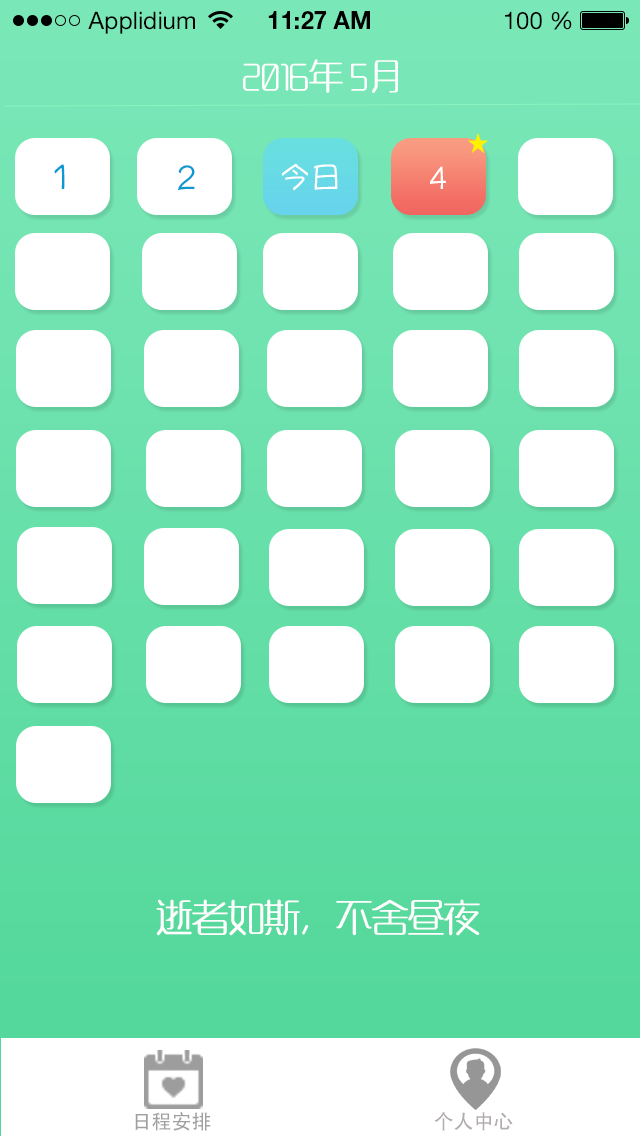
<style>
.page{position:relative;width:640px;height:1136px;background:#ffffff}
.page>*{position:absolute;margin:0}
.t1{font:24px "HelveticaNeueLTStd-Roman";color:#000000}
.t2{font:24px "HelveticaNeueLTStd-Bd";color:#000000}
.t3{font:34px "MFYaYuan_Noncommercial-Regular";color:#ffffff}
.t4{font:34px "YuppySC-Regular";color:#0c98d3}
.t5{font:31px "YuppySC-Regular";color:#fefefe}
.t6{font:31px "YuppySC-Regular";color:#ffffff}
.t7{font:36px "MFYaYuan_Noncommercial-Regular";color:#fffefe}
.t8{font:20px "AdobeHeitiStd-Regular";color:#a1a0a0}
.t9{font:20px "AdobeHeitiStd-Regular";color:#b2acac}
</style>
<div class="page">
<p class="t1" style="left:88px;top:11px;width:107px;height:23px">Applidium</p>
<p class="t2" style="left:268px;top:11px;width:102px;height:18px">11:27 AM</p>
<p class="t1" style="left:505px;top:11px;width:67px;height:19px">100 %</p>
<p class="t3" style="left:243px;top:59px;width:155px;height:34px">2016年 5月</p>
<p class="t4" style="left:54px;top:164px;width:11px;height:25px">1</p>
<p class="t4" style="left:178px;top:165px;width:17px;height:26px">2</p>
<p class="t5" style="left:281px;top:163px;width:57px;height:28px">今日</p>
<p class="t6" style="left:430px;top:166px;width:16px;height:23px">4</p>
<p class="t7" style="left:156px;top:899px;width:324px;height:37px">逝者如斯，不舍昼夜</p>
<p class="t8" style="left:135px;top:1112px;width:76px;height:19px">日程安排</p>
<p class="t9" style="left:434px;top:1112px;width:79px;height:19px">个人中心</p>
</div>
